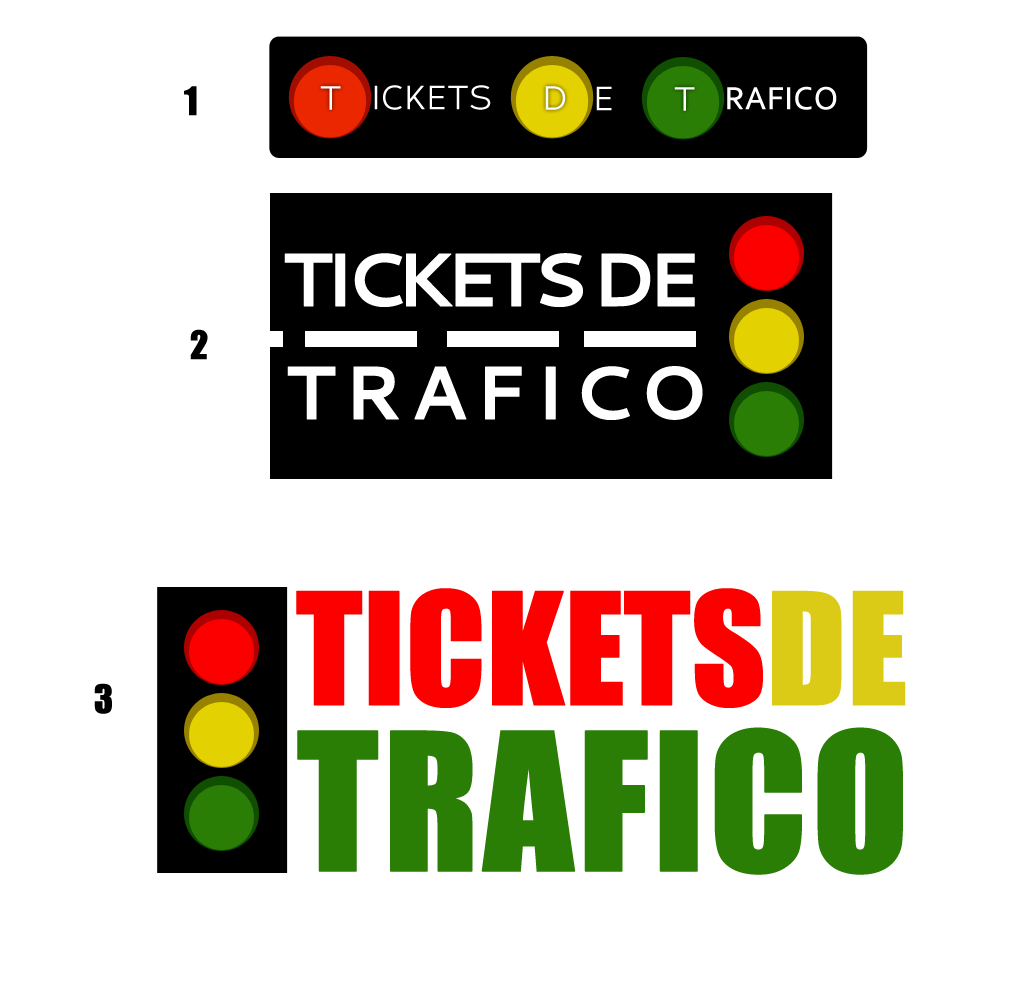
<style>
.page{position:relative;width:1024px;height:1000px;background:#ffffff}
.page>*{position:absolute;margin:0}
.t1{font:36px "Impact";letter-spacing:-0.02em;color:#000000;text-transform:uppercase;font-weight:bold}
.t2{font:33px "Corbert-Regular";color:#fffefe;font-weight:bold}
.t3{font:33px "Corbert-Regular";color:#ffffff;text-transform:uppercase;font-weight:bold}
.t4{font:33px "Corbel";color:#ffffff;text-transform:uppercase;font-weight:bold}
.t5{font:75px "Cantarell-Bold";letter-spacing:-0.14em;color:#ffffff;text-transform:uppercase;font-weight:bold}
.t6{font:75px "Cantarell-Bold";letter-spacing:0.08em;color:#ffffff;text-transform:uppercase;font-weight:bold}
.t7{font:144px "Impact";letter-spacing:-0.02em;color:#fc0000;text-transform:uppercase;font-weight:bold}
.t8{font:144px "Impact";letter-spacing:-0.02em;color:#dbcb16;text-transform:uppercase;font-weight:bold}
.t9{font:177px "Impact";color:#2a7e05;text-transform:uppercase;font-weight:bold}
</style>
<div class="page">
<p class="t1" style="left:184px;top:86px;width:13px;height:30px">1</p>
<p class="t2" style="left:320px;top:86px;width:21px;height:24px">T</p>
<p class="t3" style="left:374px;top:85px;width:117px;height:25px">ickets</p>
<p class="t2" style="left:545px;top:86px;width:21px;height:24px">D</p>
<p class="t3" style="left:596px;top:86px;width:16px;height:25px">E</p>
<p class="t2" style="left:674px;top:87px;width:21px;height:24px">T</p>
<p class="t4" style="left:727px;top:86px;width:110px;height:24px">RAFICO</p>
<p class="t5" style="left:284px;top:253px;width:411px;height:54px">tickets DE</p>
<p class="t1" style="left:190px;top:329px;width:18px;height:31px">2</p>
<p class="t6" style="left:287px;top:366px;width:416px;height:54px">trafico</p>
<p class="t7" style="left:296px;top:588px;width:610px;height:120px">tickets<span class="t8">DE</span></p>
<p class="t1" style="left:94px;top:683px;width:18px;height:31px">3</p>
<p class="t9" style="left:297px;top:727px;width:606px;height:148px">trafico</p>
</div>
